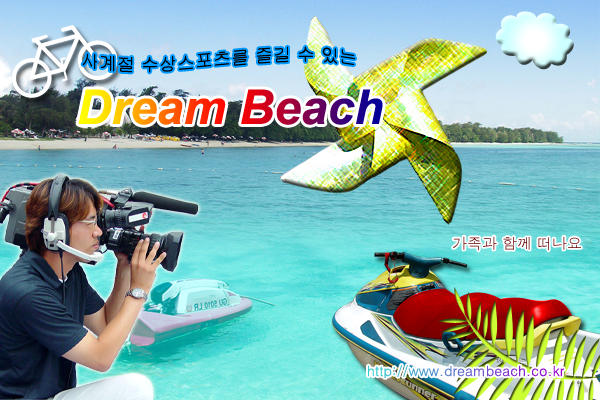
<style>
.page{position:relative;width:600px;height:400px}
.page>*{position:absolute;margin:0}
.t1{font:18px "Gulim";color:#000000}
.t2{font:48px "Arial-BoldItalicMT"}
.t3{font:15px "Dotum";color:#660000}
.t4{font:14px "Dotum"}
</style>
<div class="page">
<p class="t1" style="left:82px;top:46px;width:273px;height:27px">사계절 수상스포츠를 즐길 수 있는</p>
<p class="t2" style="left:78px;top:89px;width:305px;height:36px">Dream Beach</p>
<p class="t3" style="left:453px;top:236px;width:128px;height:15px">가족과 함께 떠나요</p>
<p class="t4" style="left:368px;top:365px;width:196px;height:13px">http://www.dreambeach.co.kr</p>
</div>
